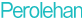
<style>
.page{position:relative;width:82px;height:21px;background:#ffffff}
.page>*{position:absolute;margin:0}
.t1{font:20px "GothicMB101Pro-Regular";letter-spacing:-0.06em;color:#1dbcc0;scale:0.9 1}
</style>
<div class="page">
<p class="t1" style="left:1px;top:2px;width:82px;height:16px">Perolehan</p>
</div>
